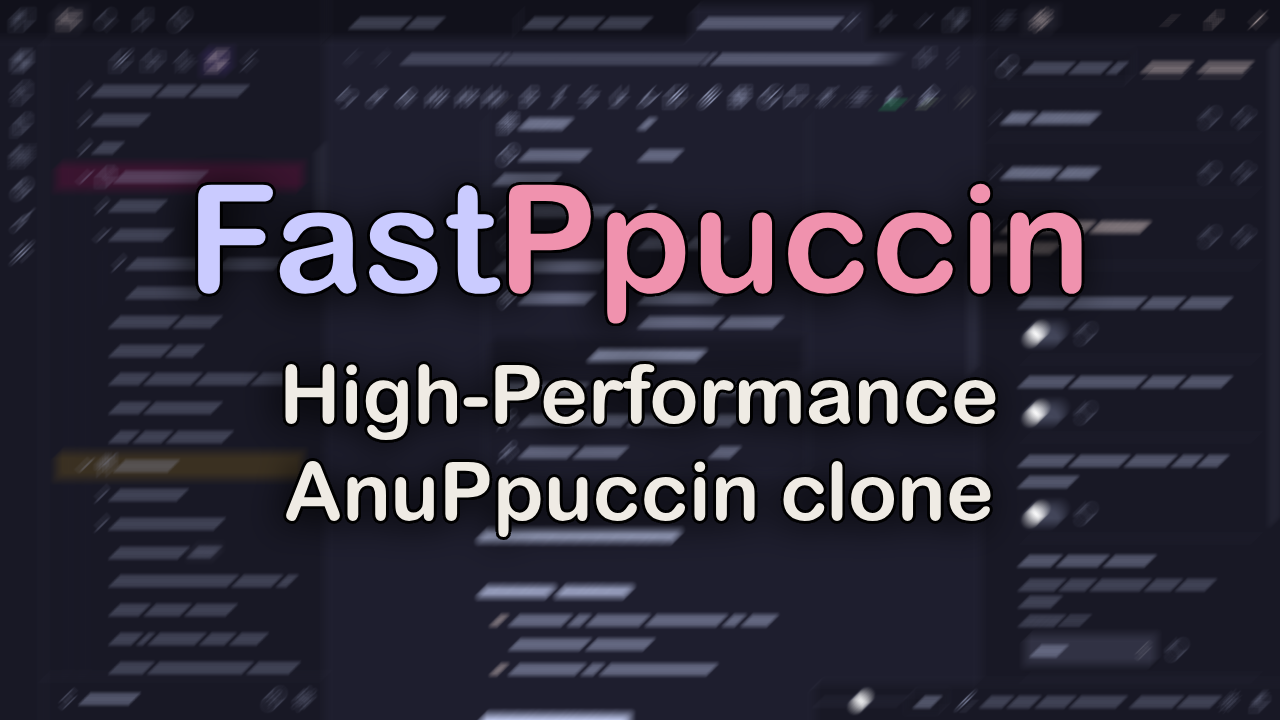
<style>
.page{position:relative;width:1280px;height:720px;background:#181825}
.page>*{position:absolute;margin:0}
.t1{font:81px "ArialRoundedMTBold";color:#efebe4}
.t2{font:150px "ArialRoundedMTBold";color:#cacbff}
.t3{font:150px "ArialRoundedMTBold";color:#f092ae}
</style>
<div class="page">
<p class="t1" style="left:198px;top:183px;width:884px;height:354px;text-align:center"><span class="t2">Fast</span><span class="t3">Ppuccin<br> <br></span>High-Performance<br>AnuPpuccin clone</p>
</div>
